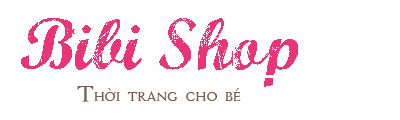
<style>
.page{position:relative;width:400px;height:120px;background:#ffffff}
.page>*{position:absolute;margin:0}
.t1{font:72px "MarcelleScript";color:#e93478}
.t2{font:24px "UVFAssassin";color:#7b5d53}
</style>
<div class="page">
<p class="t1" style="left:21px;top:18px;width:277px;height:69px">Bibi Shop</p>
<p class="t2" style="left:77px;top:86px;width:164px;height:16px">Thời trang cho bé</p>
</div>
